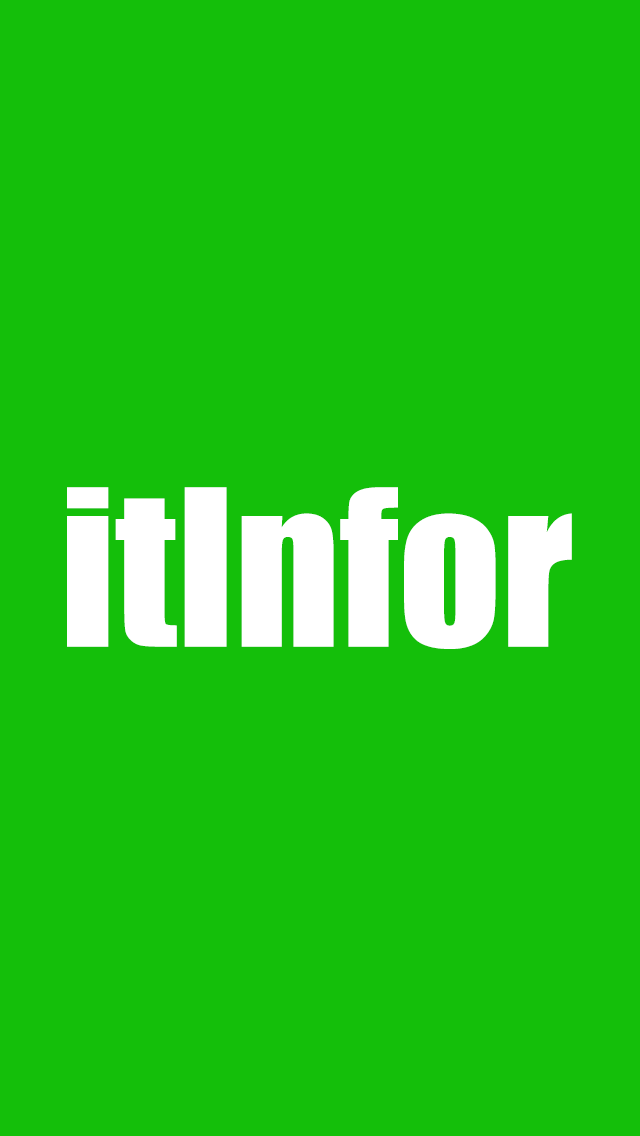
<style>
.page{position:relative;width:640px;height:1136px;background:#14bf0a}
.page>*{position:absolute;margin:0}
.t1{font:201.5px "Impact";color:#ffffff}
</style>
<div class="page">
<p class="t1" style="left:67px;top:487px;width:505px;height:162px">itInfor</p>
</div>
